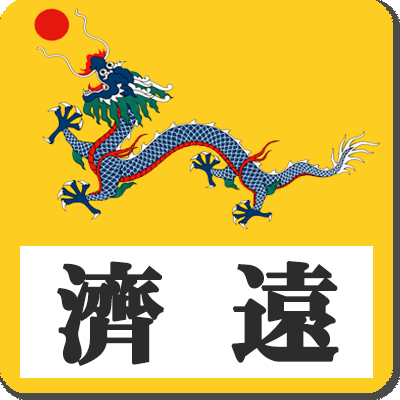
<style>
.page{position:relative;width:400px;height:400px;background:#fecd21}
.page>*{position:absolute;margin:0}
.t1{font:110px "FGPHeiseiMincho-W9";color:#2c2c2c;font-weight:bold}
</style>
<div class="page">
<p class="t1" style="left:57px;top:261px;width:282px;height:105px">濟  遠</p>
</div>
